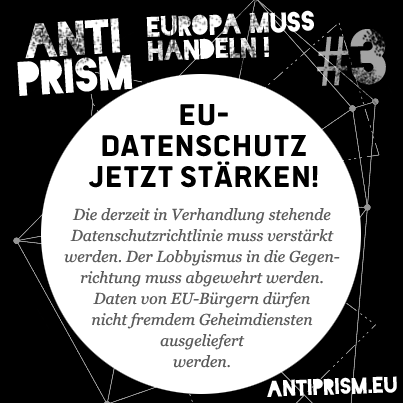
<style>
.page{position:relative;width:403px;height:403px;background:#000000}
.page>*{position:absolute;margin:0}
.t1{font:26.8px/23.9px "Blackout-Midnight";color:#ffffff}
.t2{font:45.7px/37.2px "Blackout-Midnight";color:#ffffff}
.t3{font:74.8px "MyriadPro-Regular"}
.t4{font:74.8px "Blackout-Midnight"}
.t5{font:33px/31px "PoliticsHead-Bold";color:#000000}
.t6{font:15.8px/21px "Georgia-Italic";color:#5c5c5c}
.t7{font:21.6px "Blackout-Midnight";color:#ffffff}
</style>
<div class="page">
<p class="t1" style="left:146px;top:10px;width:168px;height:51px;rotate:-2deg">EUROPA MUSS<br>HANDELN !</p>
<p class="t2" style="left:17px;top:18px;width:116px;height:78px;text-align:center;rotate:-4deg">ANTI<br>PRISM</p>
<p class="t3" style="left:317px;top:29px;width:69px;height:57px;rotate:-2deg">#<span class="t4">3</span></p>
<p class="t5" style="left:89px;top:104px;width:229px;height:84px;text-align:center">EU-<br>DATENSCHUTZ<br>JETZT STÄRKEN!</p>
<p class="t6" style="left:64px;top:208px;width:276px;height:160px;text-align:center">Die derzeit in Verhandlung stehende Datenschutzrichtlinie muss verstärkt werden. Der Lobbyismus in die Gegenrichtung muss abgewehrt werden. Daten von EU-Bürgern dürfen<br>nicht fremdem Geheimdiensten<br>ausgeliefert<br>werden.</p>
<p class="t7" style="left:267px;top:376px;width:130px;height:21px;rotate:-2deg">antiprism.eu</p>
</div>
